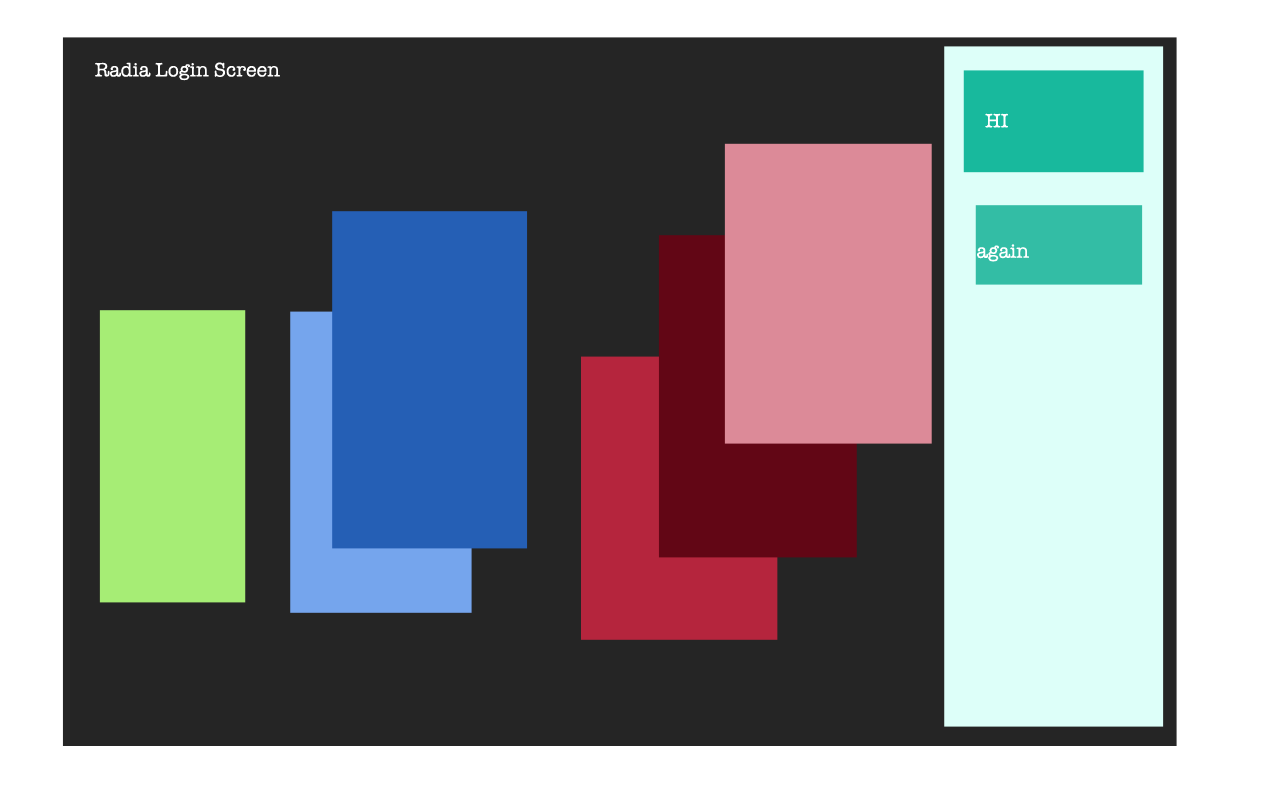
<style>
.page{position:relative;width:1280px;height:800px;background:#252525}
.page>*{position:absolute;margin:0}
.t1{font:20px "AmericanTypewriter";color:#ffffff}
</style>
<div class="page">
<p class="t1" style="left:95px;top:62px;width:185px;height:19px">Radia Login Screen</p>
<p class="t1" style="left:985px;top:113px;width:23px;height:15px">HI</p>
<p class="t1" style="left:977px;top:244px;width:52px;height:18px">again</p>
</div>
